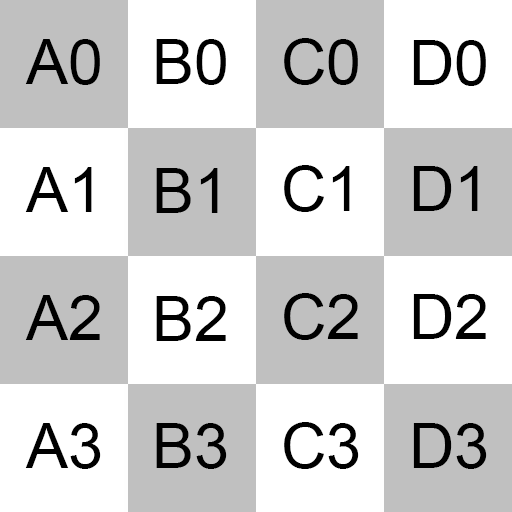
<style>
.page{position:relative;width:512px;height:512px;background:#c0c0c0}
.page>*{position:absolute;margin:0}
.t1{font:62.7px "ArialMT";color:#000000}
</style>
<div class="page">
<p class="t1" style="left:25px;top:39px;width:75px;height:46px">A0</p>
<p class="t1" style="left:156px;top:39px;width:70px;height:46px">B0</p>
<p class="t1" style="left:284px;top:38px;width:74px;height:47px">C0</p>
<p class="t1" style="left:413px;top:40px;width:73px;height:46px">D0</p>
<p class="t1" style="left:25px;top:167px;width:67px;height:45px">A1</p>
<p class="t1" style="left:156px;top:168px;width:62px;height:45px">B1</p>
<p class="t1" style="left:284px;top:165px;width:66px;height:47px">C1</p>
<p class="t1" style="left:413px;top:166px;width:65px;height:45px">D1</p>
<p class="t1" style="left:284px;top:293px;width:74px;height:47px">C2</p>
<p class="t1" style="left:413px;top:294px;width:73px;height:45px">D2</p>
<p class="t1" style="left:25px;top:295px;width:75px;height:45px">A2</p>
<p class="t1" style="left:156px;top:296px;width:70px;height:45px">B2</p>
<p class="t1" style="left:25px;top:423px;width:76px;height:46px">A3</p>
<p class="t1" style="left:156px;top:423px;width:71px;height:46px">B3</p>
<p class="t1" style="left:284px;top:422px;width:75px;height:47px">C3</p>
<p class="t1" style="left:413px;top:423px;width:74px;height:46px">D3</p>
</div>
